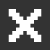
<style>
.page{position:relative;width:50px;height:50px;background:#333333}
.page>*{position:absolute;margin:0}
.t1{font:58.5px "Terminal";letter-spacing:-0.025em;color:#ffffff}
</style>
<div class="page">
<p class="t1" style="left:8px;top:9px;width:34px;height:33px">x</p>
</div>
